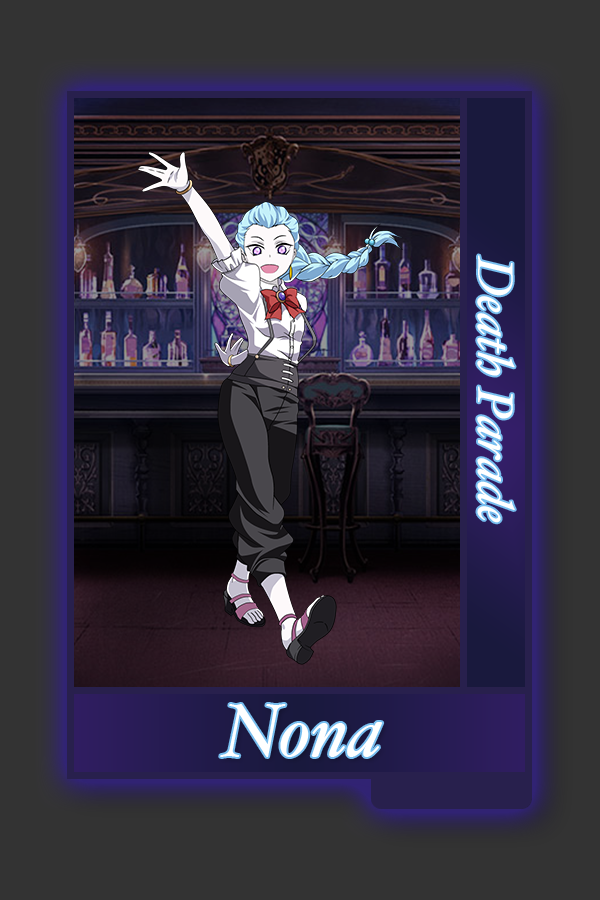
<style>
.page{position:relative;width:600px;height:900px;background:#333333}
.page>*{position:absolute;margin:0}
.t1{font:50px "HoeflerText-Italic";color:#ffffff}
.t2{font:75px "HoeflerText-Italic";color:#ffffff}
</style>
<div class="page">
<p class="t1" style="left:477px;top:255px;width:38px;height:268px;rotate:90deg">Death Parade</p>
<p class="t2" style="left:220px;top:704px;width:163px;height:53px">Nona</p>
</div>
